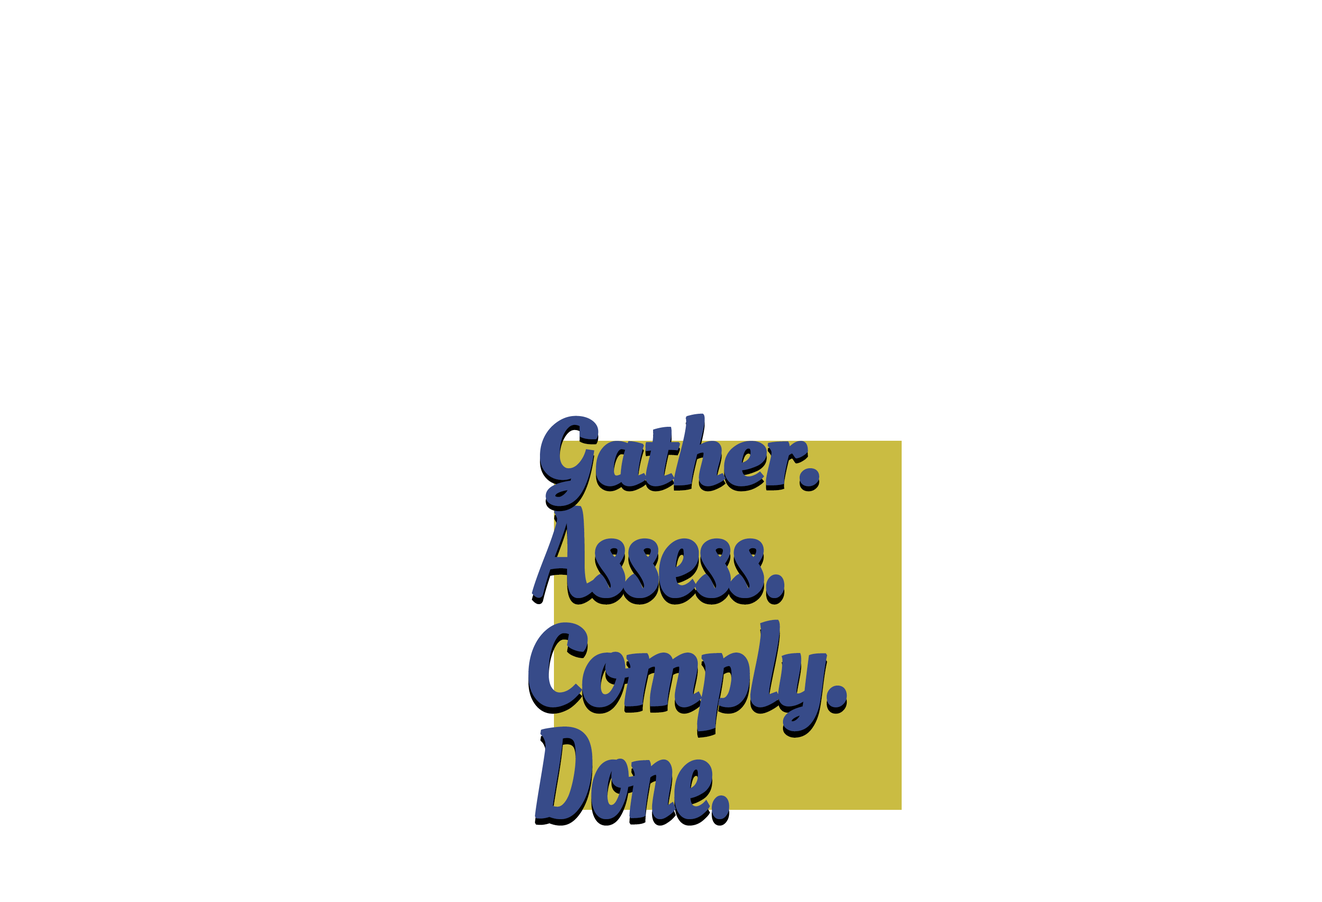
<style>
.page{position:relative;width:1322px;height:902px;background:#ffffff}
.page>*{position:absolute;margin:0}
.t1{font:93.6px "OleoScript-Regular";letter-spacing:-0.04em;color:#374b89;font-weight:bold;scale:1.12 1}
.t2{font:123.3px "OleoScript-Regular";letter-spacing:-0.04em;color:#374b89;font-weight:bold;scale:0.79 1}
.t3{font:113px "OleoScript-Regular";letter-spacing:-0.04em;color:#374b89;font-weight:bold;scale:0.95 1}
.t4{font:123.3px "OleoScript-Regular";letter-spacing:-0.04em;color:#374b89;font-weight:bold;scale:0.75 1}
</style>
<div class="page">
<p class="t1" style="left:540px;top:413px;width:279px;height:93px">Gather.</p>
<p class="t1" style="left:540px;top:418px;width:279px;height:94px">Gather.</p>
<p class="t2" style="left:532px;top:505px;width:252px;height:93px">Assess.</p>
<p class="t2" style="left:532px;top:512px;width:252px;height:93px">Assess.</p>
<p class="t3" style="left:528px;top:626px;width:319px;height:112px">Comply.</p>
<p class="t3" style="left:528px;top:620px;width:319px;height:112px">Comply.</p>
<p class="t4" style="left:535px;top:733px;width:194px;height:93px">Done.</p>
<p class="t4" style="left:535px;top:727px;width:194px;height:92px">Done.</p>
</div>
